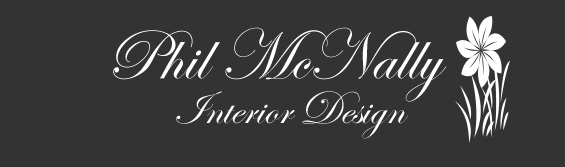
<style>
.page{position:relative;width:565px;height:167px;background:#333333}
.page>*{position:absolute;margin:0}
.t1{font:72px "EdwardianScriptITC";color:#ffffff}
.t2{font:48px "EdwardianScriptITC";color:#ffffff}
</style>
<div class="page">
<p class="t1" style="left:113px;top:27px;width:334px;height:75px">Phil McNally</p>
<p class="t2" style="left:176px;top:91px;width:233px;height:48px">Interior Design</p>
</div>
